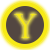
<style>
.page{position:relative;width:50px;height:50px}
.page>*{position:absolute;margin:0}
.t1{font:32.8px "PerpetuaTitlingMT-Light";color:#f7ea17}
</style>
<div class="page">
<p class="t1" style="left:14px;top:14px;width:23px;height:24px">Y</p>
</div>
